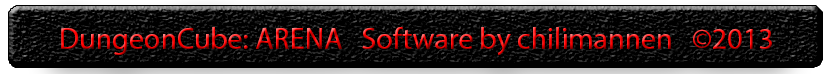
<style>
.page{position:relative;width:829px;height:74px;background:#000000}
.page>*{position:absolute;margin:0}
.t1{font:30px "MyriadPro-Regular"}
</style>
<div class="page">
<p class="t1" style="left:61px;top:27px;width:711px;height:29px">DungeonCube: ARENA   Software by chilimannen   ©2013</p>
</div>
